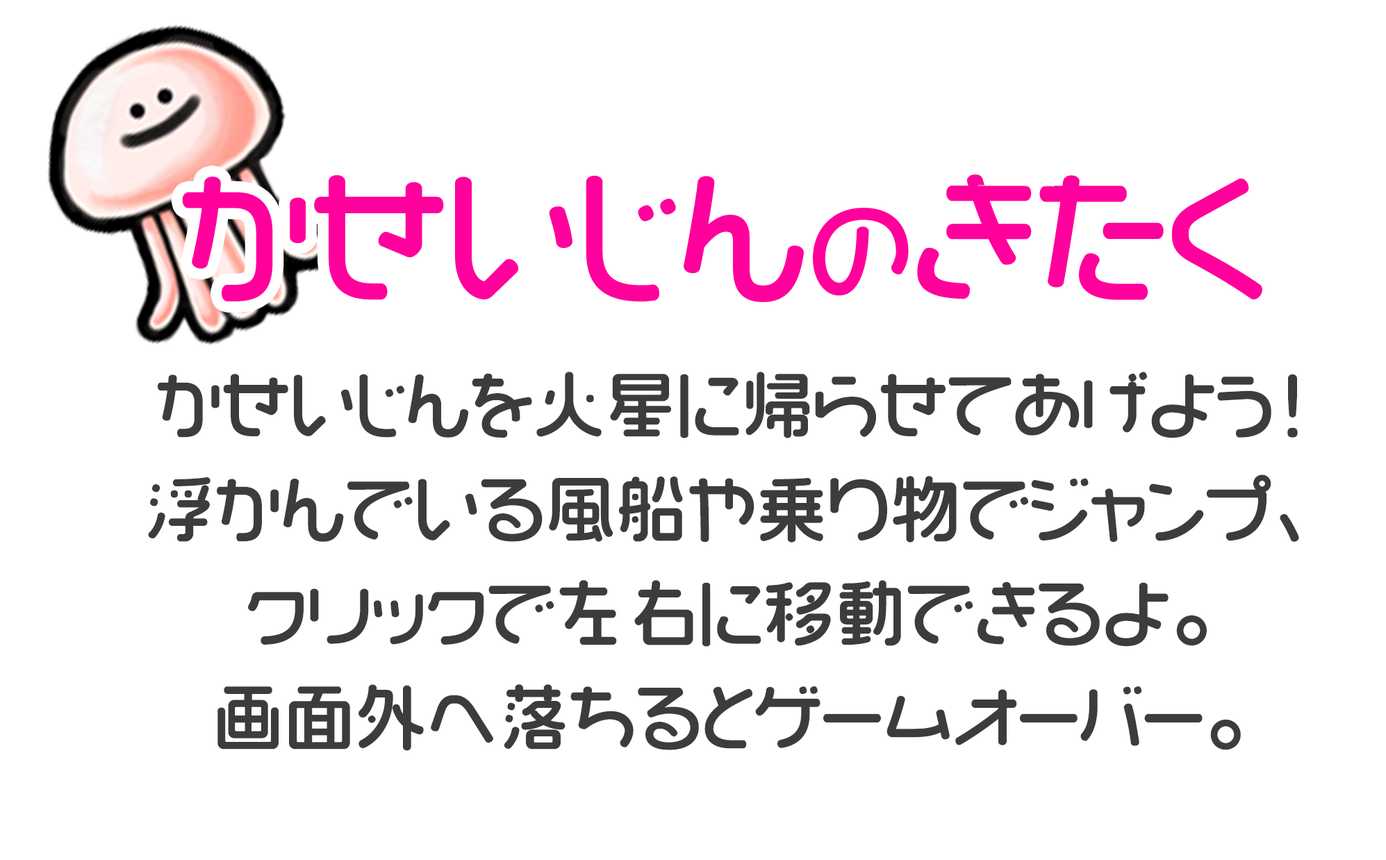
<style>
.page{position:relative;width:1386px;height:860px;background:#ffffff}
.page>*{position:absolute;margin:0}
.t1{font:69.5px/104.2px "VDL-MegaMaru-Regular";color:#3c3c3c;font-weight:bold}
</style>
<div class="page">
<p class="t1" style="left:148px;top:372px;width:1151px;height:379px;text-align:center">かせいじんを火星に帰らせてあげよう！<br>浮かんでいる風船や乗り物でジャンプ、<br>クリックで左右に移動できるよ。<br>画面外へ落ちるとゲームオーバー。</p>
</div>
